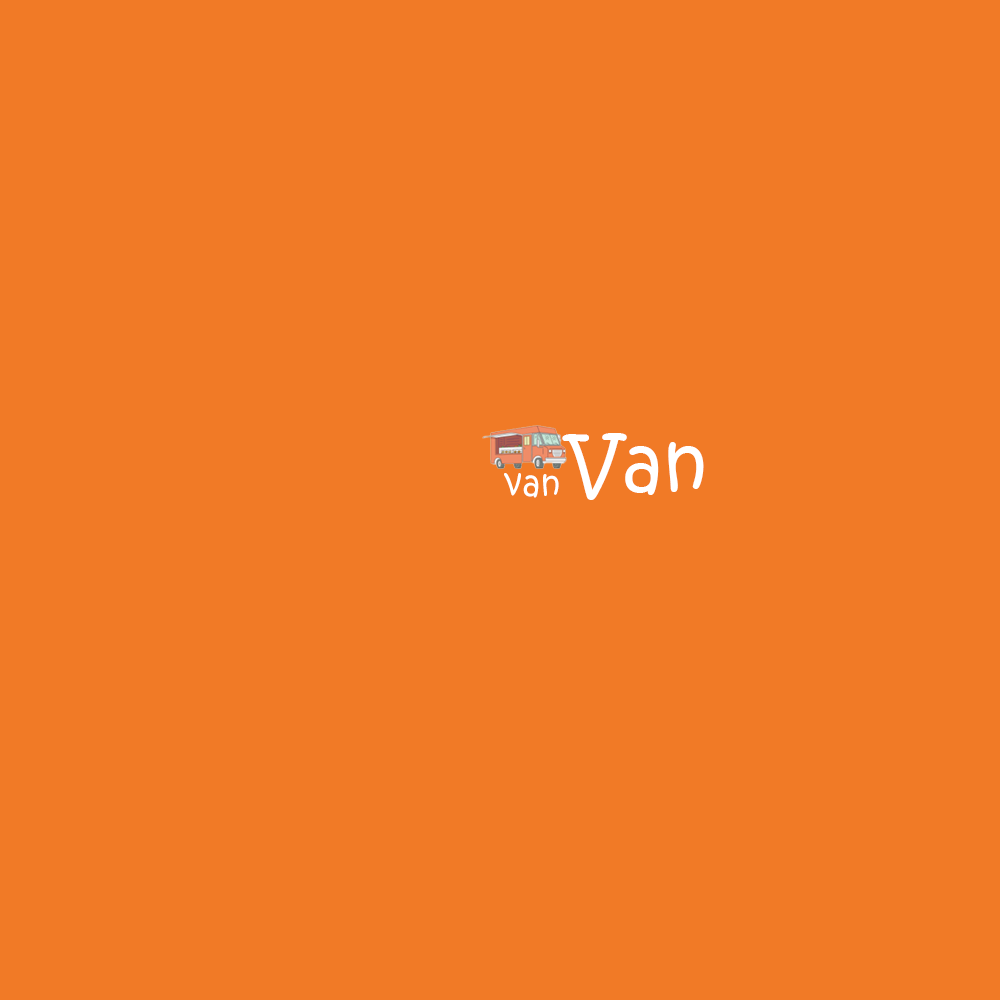
<style>
.page{position:relative;width:1000px;height:1000px;background:#f17a26}
.page>*{position:absolute;margin:0}
.t1{font:75px "KristenITC-Regular";color:#ffffff}
.t2{font:33.3px "KristenITC-Regular";color:#ffffff}
</style>
<div class="page">
<p class="t1" style="left:562px;top:433px;width:142px;height:67px">Van</p>
<p class="t2" style="left:504px;top:473px;width:55px;height:25px">van</p>
</div>
